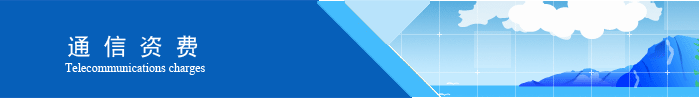
<style>
.page{position:relative;width:700px;height:98px;background:#065fb9}
.page>*{position:absolute;margin:0}
.t1{font:24px "SimHei";letter-spacing:0.5em;color:#ffffff}
.t2{font:12px "TimesNewRomanPSMT";color:#ffffff}
</style>
<div class="page">
<p class="t1" style="left:68px;top:35px;width:130px;height:23px">通信资费</p>
<p class="t2" style="left:65px;top:63px;width:140px;height:12px">Telecommunications charges</p>
</div>
